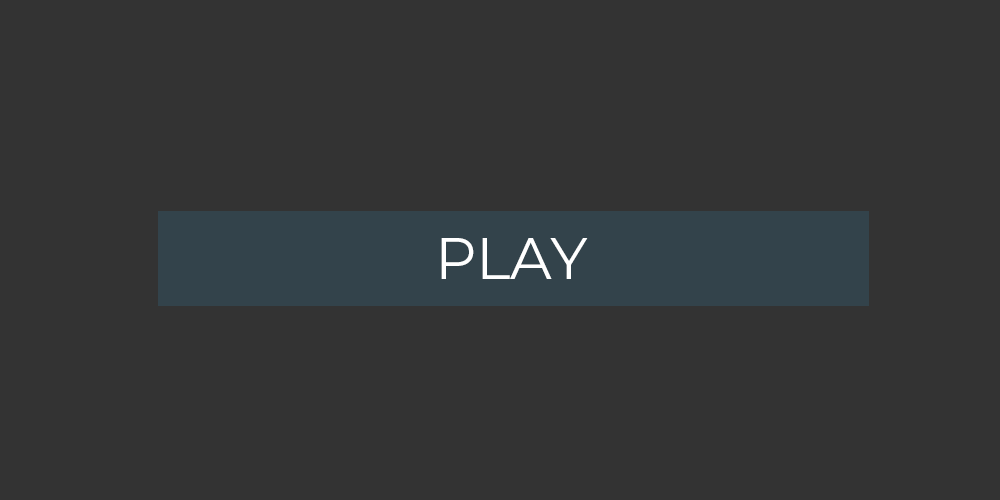
<style>
.page{position:relative;width:1000px;height:500px;background:#333333}
.page>*{position:absolute;margin:0}
.t1{font:58.3px "Montserrat-Regular";color:#ffffff}
</style>
<div class="page">
<p class="t1" style="left:441px;top:238px;width:147px;height:41px">PLAY</p>
</div>
